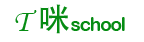
<style>
.page{position:relative;width:144px;height:42px;background:#ffffff}
.page>*{position:absolute;margin:0}
.t1{font:32px "MonotypeCorsiva";letter-spacing:-0.05em;color:#068c13}
.t2{font:32px "AdobeHeitiStd-Regular";letter-spacing:-0.05em;color:#068c13}
.t3{font:18.7px "ArialRoundedMTBold";letter-spacing:-0.05em;color:#068c13}
</style>
<div class="page">
<p class="t1" style="left:15px;top:4px;width:54px;height:30px">T  <span class="t2">咪</span></p>
<p class="t3" style="left:71px;top:17px;width:54px;height:14px">school</p>
</div>
